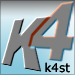
<style>
.page{position:relative;width:75px;height:75px;background:#808080}
.page>*{position:absolute;margin:0}
.t1{font:12px "Verdana";color:#000000}
</style>
<div class="page">
<p class="t1" style="left:45px;top:62px;width:25px;height:11px">k4st</p>
</div>
